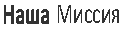
<style>
.page{position:relative;width:136px;height:33px;background:#ffffff}
.page>*{position:absolute;margin:0}
.t1{font:29.4px "Calibri";color:#323232;scale:0.68 1}
.t2{font:29.4px "Calibri";color:#323232;font-weight:bold;scale:0.68 1}
</style>
<div class="page">
<p class="t1" style="left:4px;top:5px;width:115px;height:19px"><span class="t2">Наша </span>Миссия</p>
</div>
